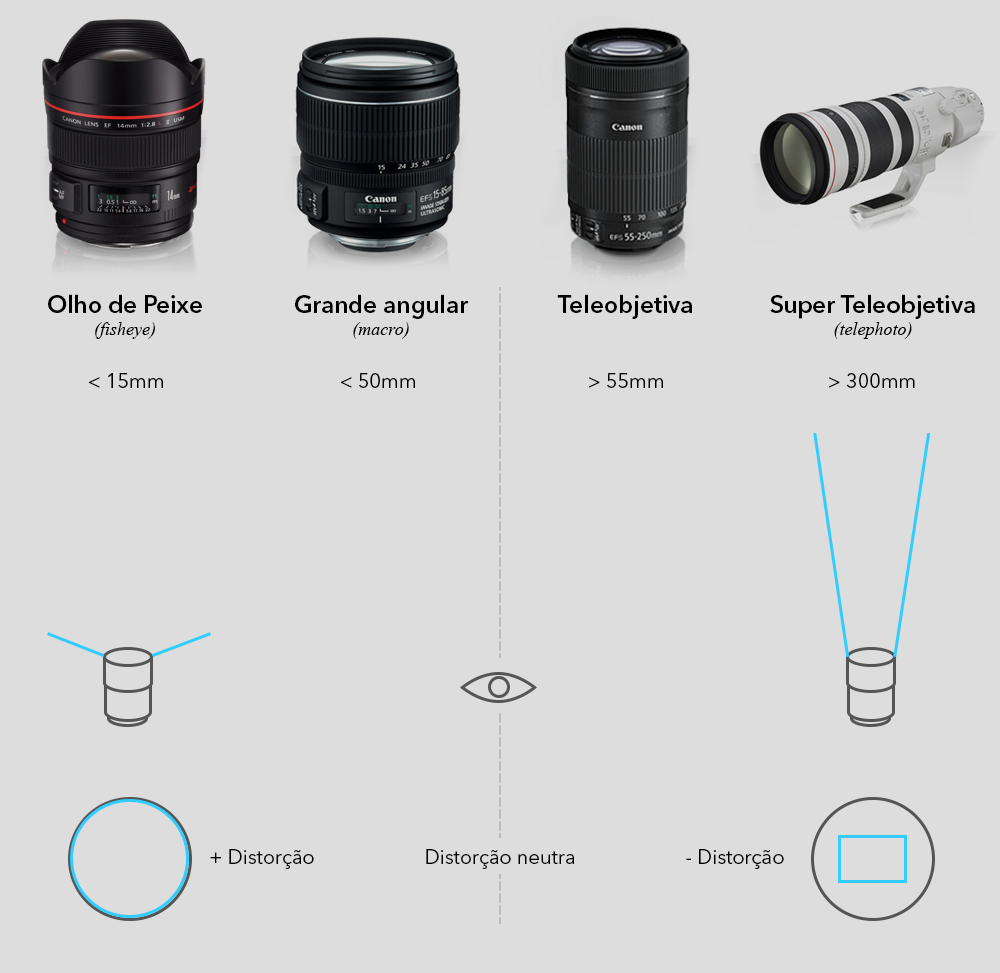
<style>
.page{position:relative;width:1000px;height:973px;background:#dddddd}
.page>*{position:absolute;margin:0}
.t1{font:24px "AvenirNextLTPro-Demi";color:#000000}
.t2{font:18px "TimesNewRomanPS-ItalicMT";color:#000000}
.t3{font:20px "AvenirNextLTPro-Regular";color:#000000}
</style>
<div class="page">
<p class="t1" style="left:48px;top:294px;width:154px;height:45px;text-align:center">Olho de Peixe<br><span class="t2">(fisheye)</span></p>
<p class="t1" style="left:295px;top:294px;width:173px;height:45px;text-align:center">Grande angular<br><span class="t2">(macro)</span></p>
<p class="t1" style="left:557px;top:294px;width:135px;height:25px">Teleobjetiva</p>
<p class="t1" style="left:770px;top:294px;width:205px;height:45px;text-align:center">Super Teleobjetiva<br><span class="t2">(telephoto)</span></p>
<p class="t3" style="left:89px;top:373px;width:74px;height:15px">&lt; 15mm</p>
<p class="t3" style="left:341px;top:373px;width:74px;height:15px">&lt; 50mm</p>
<p class="t3" style="left:589px;top:373px;width:74px;height:15px">&gt; 55mm</p>
<p class="t3" style="left:829px;top:373px;width:86px;height:15px">&gt; 300mm</p>
<p class="t3" style="left:210px;top:849px;width:104px;height:20px">+ Distorção</p>
<p class="t3" style="left:426px;top:849px;width:149px;height:20px">Distorção neutra</p>
<p class="t3" style="left:686px;top:849px;width:98px;height:20px">- Distorção</p>
</div>
